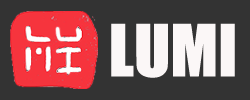
<style>
.page{position:relative;width:250px;height:100px;background:#333333}
.page>*{position:absolute;margin:0}
.t1{font:66.7px "Impact";color:#fbf7f7}
</style>
<div class="page">
<p class="t1" style="left:111px;top:23px;width:124px;height:55px">LUMI</p>
</div>
